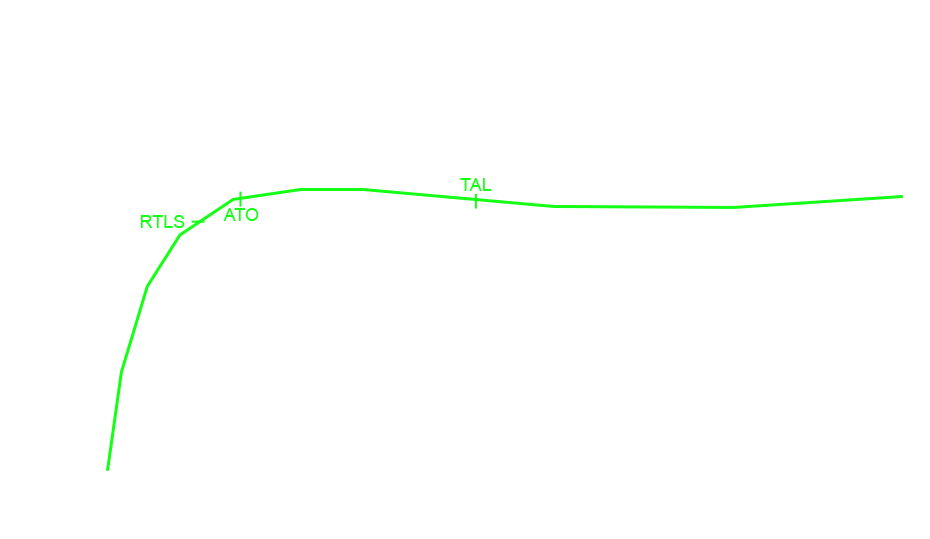
<style>
.page{position:relative;width:930px;height:539px;background:#ffffff}
.page>*{position:absolute;margin:0}
.t1{font:18px "ArialMT";color:#14ff15}
</style>
<div class="page">
<p class="t1" style="left:460px;top:178px;width:32px;height:13px">TAL</p>
<p class="t1" style="left:223px;top:208px;width:36px;height:13px">ATO</p>
<p class="t1" style="left:140px;top:215px;width:45px;height:13px">RTLS</p>
</div>
